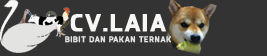
<style>
.page{position:relative;width:267px;height:56px;background:#333333}
.page>*{position:absolute;margin:0}
.t1{font:24.8px "Gothland";letter-spacing:0.05em;color:#f8f7f6;font-weight:bold}
.t2{font:8.2px "Gothland";letter-spacing:0.05em;color:#e3e3e2;font-weight:bold}
</style>
<div class="page">
<p class="t1" style="left:70px;top:14px;width:96px;height:18px">cv.laia</p>
<p class="t2" style="left:65px;top:36px;width:106px;height:7px">bibit dan pakan ternak</p>
</div>
